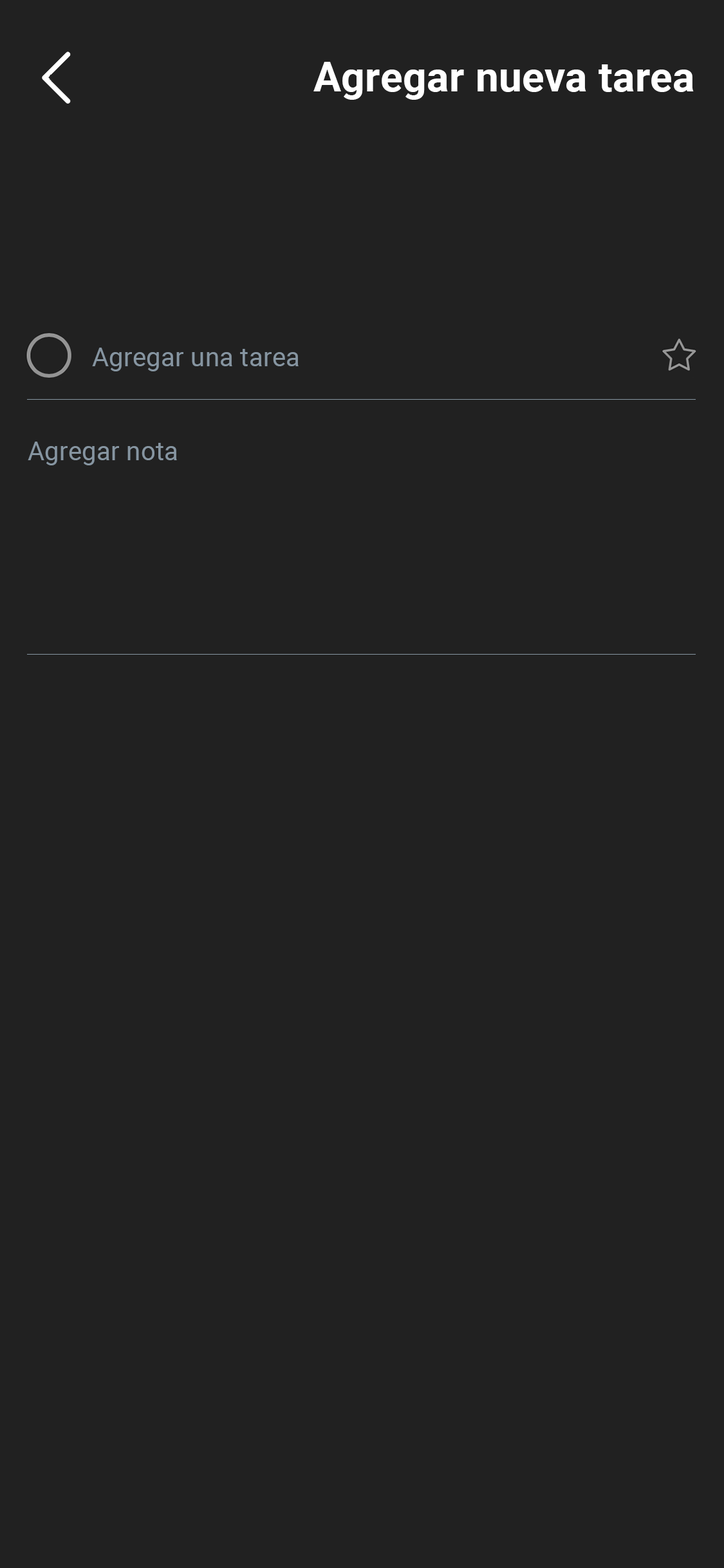
<style>
.page{position:relative;width:724px;height:1568px;background:#212121}
.page>*{position:absolute;margin:0}
.t1{font:41.2px "Roboto-Bold";letter-spacing:0.008em;color:#ffffff}
.t2{font:25.7px "Roboto-Regular";letter-spacing:0.008em;color:#8695a1}
</style>
<div class="page">
<p class="t1" style="left:313px;top:62px;width:381px;height:38px">Agregar nueva tarea</p>
<p class="t2" style="left:92px;top:348px;width:207px;height:23px">Agregar una tarea</p>
<p class="t2" style="left:28px;top:442px;width:149px;height:23px">Agregar nota</p>
</div>
